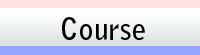
<style>
.page{position:relative;width:200px;height:55px}
.page>*{position:absolute;margin:0}
.t1{font:30px "BellGothicStd-Bold";color:#000000}
</style>
<div class="page">
<p class="t1" style="left:62px;top:17px;width:83px;height:23px">Course</p>
</div>
